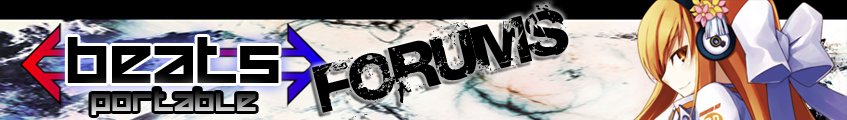
<style>
.page{position:relative;width:847px;height:120px;background:#000000}
.page>*{position:absolute;margin:0}
.t1{font:59.1px "Base02";color:#000000;scale:1.03 1}
.t2{font:46.1px "HappyKiller";color:#000000;scale:1.05 1}
</style>
<div class="page">
<p class="t1" style="left:312px;top:2px;width:257px;height:116px;rotate:-14deg">FORUMS</p>
<p class="t2" style="left:67px;top:37px;width:212px;height:46px">beats</p>
</div>
